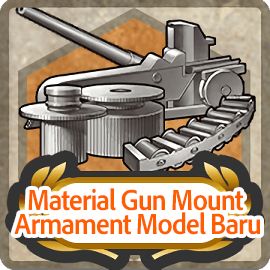
<style>
.page{position:relative;width:270px;height:270px}
.page>*{position:absolute;margin:0}
.t1{font:30px/24px "AdobeClean-Bold";letter-spacing:-0.04em;color:#ff5d00;scale:0.9 1}
</style>
<div class="page">
<p class="t1" style="left:14px;top:188px;width:247px;height:47px;text-align:center">Material Gun Mount <br>Armament Model Baru</p>
</div>
